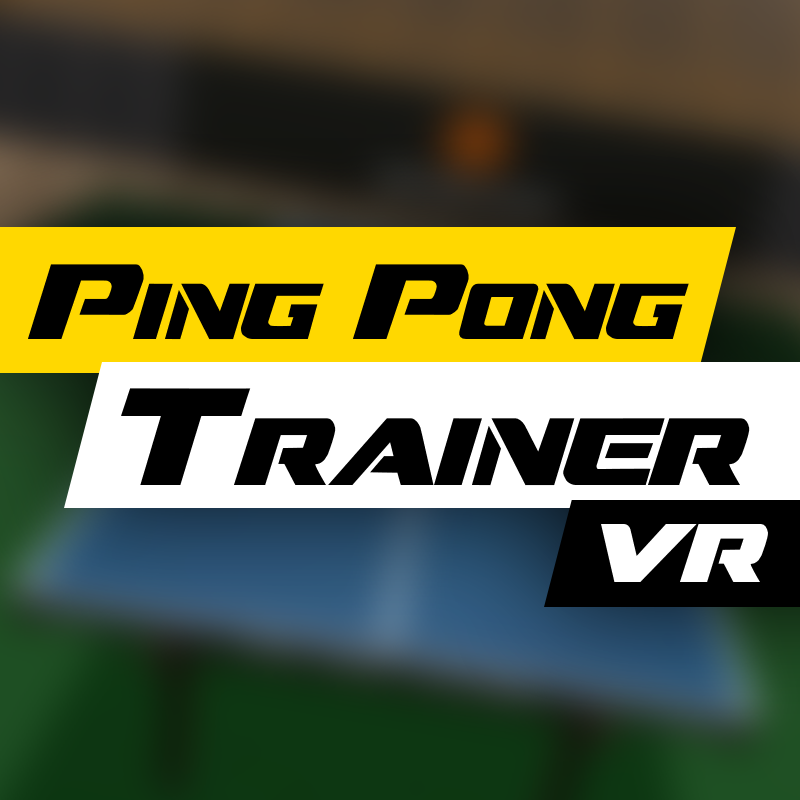
<style>
.page{position:relative;width:800px;height:800px}
.page>*{position:absolute;margin:0}
.t1{font:79px "DreamMMA";color:#000000}
.t2{font:106.5px "DreamMMA";color:#000000}
.t3{font:95.3px "DreamMMA";color:#000000}
.t4{font:138.1px "DreamMMA";color:#000000}
.t5{font:82.8px "DreamMMA";color:#ffffff}
</style>
<div class="page">
<p class="t1" style="left:28px;top:264px;width:661px;height:76px"><span class="t2">p</span>ing <span class="t2">p</span>ong</p>
<p class="t3" style="left:121px;top:388px;width:629px;height:98px"><span class="t4">t</span>rainer</p>
<p class="t5" style="left:601px;top:524px;width:167px;height:58px">vr</p>
</div>
